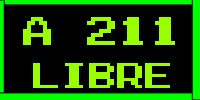
<style>
.page{position:relative;width:200px;height:100px;background:#000000}
.page>*{position:absolute;margin:0}
.t1{font:40px "Zig";color:#99ff00}
.t2{font:35px "Zig";color:#99ff00}
</style>
<div class="page">
<p class="t1" style="left:23px;top:17px;width:152px;height:28px">a 211</p>
<p class="t2" style="left:33px;top:63px;width:137px;height:25px">libre</p>
</div>
